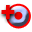
<style>
.page{position:relative;width:32px;height:32px;background:#ffffff}
.page>*{position:absolute;margin:0}
.t1{font:24px "Arial-Black";letter-spacing:0.025em;color:#ea0202}
</style>
<div class="page">
<p class="t1" style="left:1px;top:5px;width:14px;height:14px">+</p>
</div>
